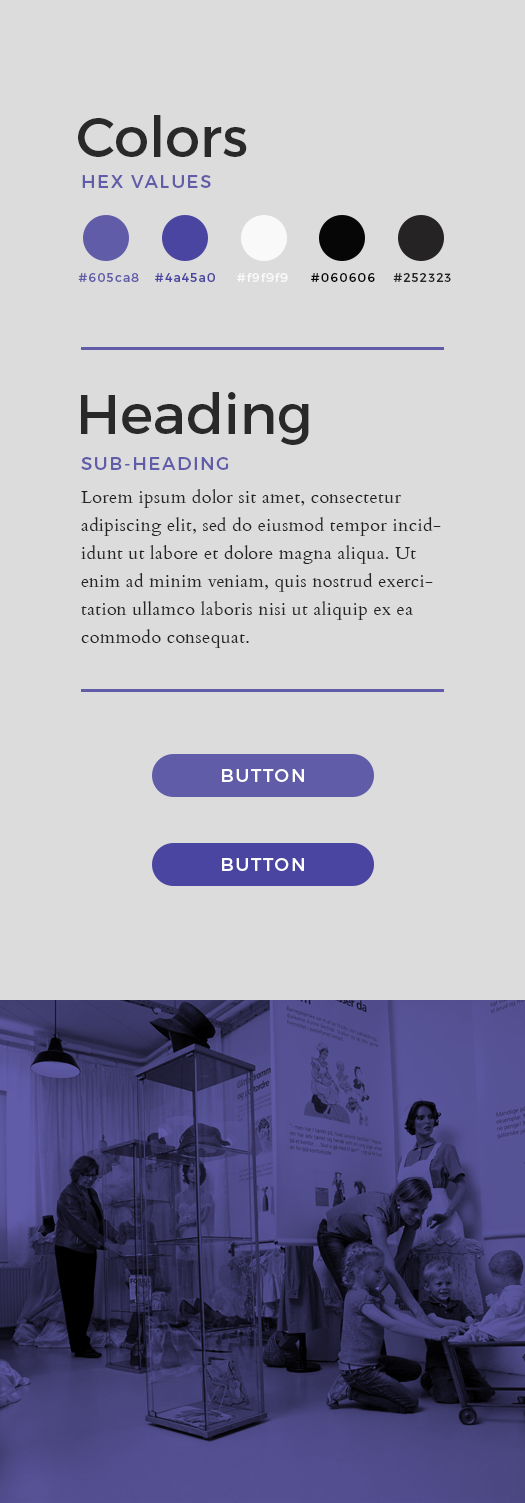
<style>
.page{position:relative;width:525px;height:1503px;background:#dcdcdc}
.page>*{position:absolute;margin:0}
.t1{font:56px "Montserrat-Regular";color:#292929}
.t2{font:18px "Montserrat-Regular";letter-spacing:0.1em;color:#605ca8}
.t3{font:12.2px "Montserrat-Regular";letter-spacing:0.1em;color:#605ca8}
.t4{font:12.2px "Montserrat-Regular";letter-spacing:0.1em;color:#4a45a0}
.t5{font:12.2px "Montserrat-Regular";letter-spacing:0.1em;color:#f9f9f9}
.t6{font:12.2px "Montserrat-Regular";letter-spacing:0.1em;color:#060606}
.t7{font:12.2px "Montserrat-Regular";letter-spacing:0.1em;color:#252323}
.t8{font:18px/28px "Cardo";letter-spacing:0.025em;color:#252323}
.t9{font:18px "Montserrat-Regular";letter-spacing:0.1em;color:#ffffff}
</style>
<div class="page">
<p class="t1" style="left:78px;top:115px;width:169px;height:42px">Colors</p>
<p class="t2" style="left:82px;top:175px;width:129px;height:13px">HEX VALUES</p>
<p class="t3" style="left:78px;top:273px;width:373px;height:9px">#605ca8   <span class="t4">#4a45a0</span><span class="t5">     #f9f9f9     </span><span class="t6">#060606    </span><span class="t7">#252323</span></p>
<p class="t1" style="left:81px;top:392px;width:228px;height:53px">Heading</p>
<p class="t2" style="left:81px;top:457px;width:148px;height:13px">SUB-HEADING</p>
<p class="t8" style="left:81px;top:489px;width:360px;height:159px">Lorem ipsum dolor sit amet, consectetur adipiscing elit, sed do eiusmod tempor incididunt ut labore et dolore magna aliqua. Ut enim ad minim veniam, quis nostrud exercitation ullamco laboris nisi ut aliquip ex ea commodo consequat.</p>
<p class="t9" style="left:222px;top:769px;width:82px;height:13px">BUTTON</p>
<p class="t9" style="left:222px;top:858px;width:82px;height:13px">BUTTON</p>
</div>
